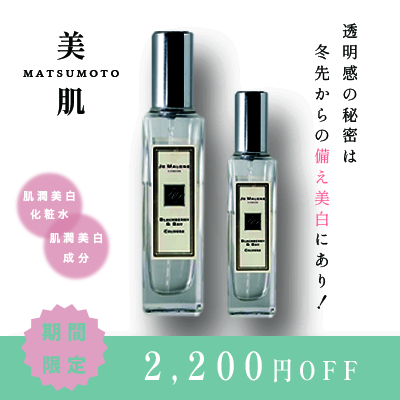
<style>
.page{position:relative;width:400px;height:400px;background:#ffffff}
.page>*{position:absolute;margin:0}
.t1{font:16px "ShipporiMinchoB1-Regular";letter-spacing:0.3em;color:#040606}
.t2{font:16px "ShipporiMinchoB1-Regular";letter-spacing:0.3em;color:#ff5092}
.t3{font:30px "ShipporiMincho-OTF-Bold";letter-spacing:0.3em;color:#040606}
.t4{font:10px "IowanOldStyle-Bold";letter-spacing:0.3em;color:#040606}
.t5{font:10.7px "HiraginoSansGB-W6";letter-spacing:0.3em;color:#ffffff}
.t6{font:11.1px "HiraginoSansGB-W6";letter-spacing:0.3em;color:#ffffff}
.t7{font:19.2px "KozGoPro-Heavy";letter-spacing:0.3em;color:#6fcaa5}
.t8{font:38.6px "ShipporiMincho-OTF-Bold";letter-spacing:0.3em;color:#ffffff;scale:0.8 1}
.t9{font:25.8px "ShipporiMincho-OTF-Bold";letter-spacing:0.3em;color:#ffffff;scale:0.8 1}
</style>
<div class="page">
<p class="t1" style="left:314px;top:23px;width:44px;height:286px">透明感の秘密は<br>　冬先からの<span class="t2">備え美白</span>にあり！</p>
<p class="t3" style="left:57px;top:31px;width:28px;height:85px">美 肌</p>
<p class="t4" style="left:23px;top:70px;width:96px;height:7px">MATSUMOTO</p>
<p class="t5" style="left:23px;top:190px;width:52px;height:30px;text-align:center">肌潤美白<br>化粧水</p>
<p class="t6" style="left:49px;top:232px;width:53px;height:32px;text-align:center">肌潤美白<br>成分</p>
<p class="t7" style="left:42px;top:323px;width:44px;height:51px">期間<br>限定</p>
<p class="t8" style="left:144px;top:351px;width:214px;height:34px">2,200<span class="t9">円OFF</span></p>
</div>
